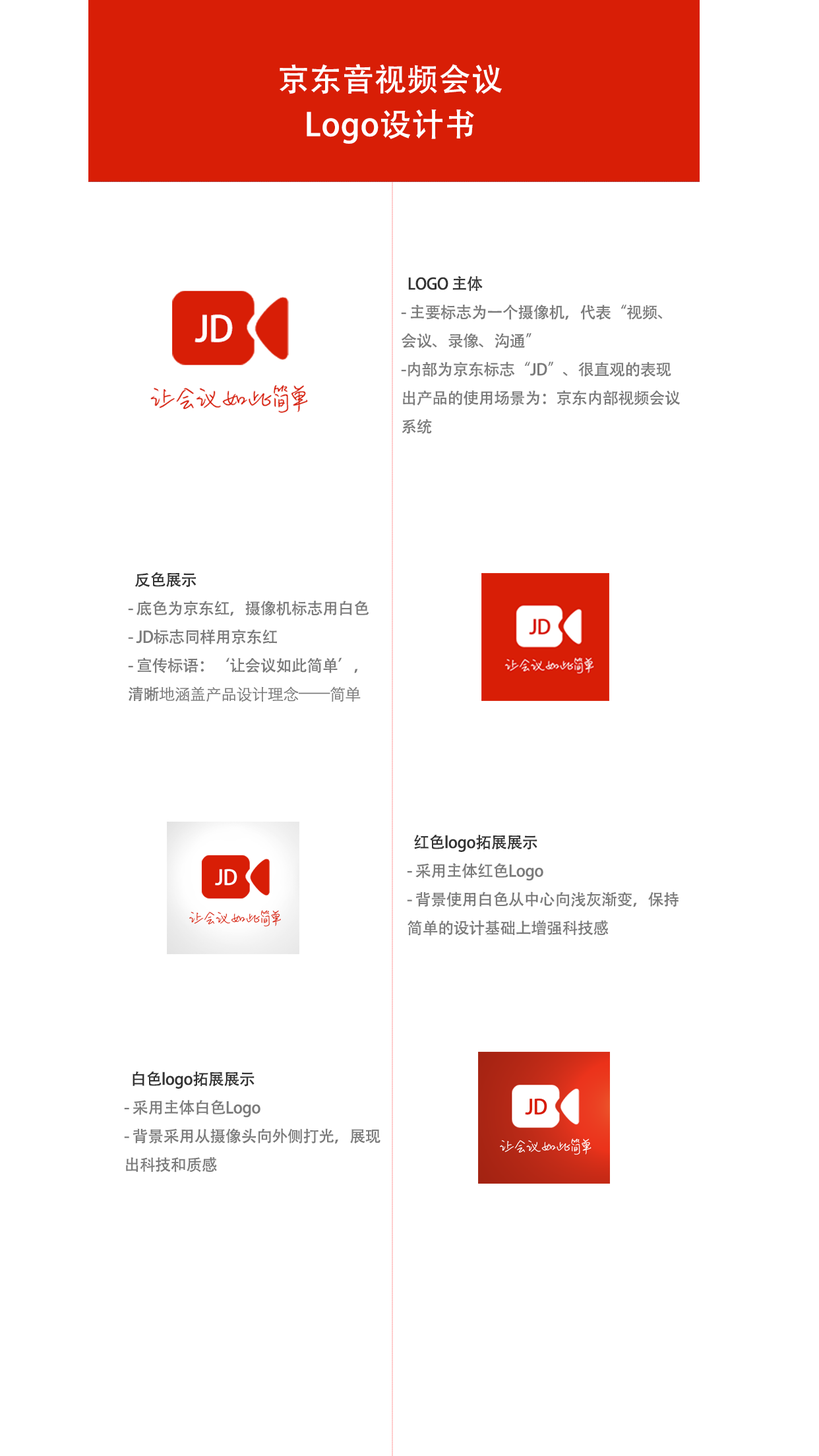
<style>
.page{position:relative;width:819px;height:1456px;background:#ffffff}
.page>*{position:absolute;margin:0}
.t1{font:31.7px/45.1px "AdobeHeitiStd-Regular";letter-spacing:0.02em;color:#ffffff}
.t2{font:15.8px/28.6px "AdobeHeitiStd-Regular";letter-spacing:-0.02em;color:#7a7a7a}
.t3{font:15.8px/28.6px "AdobeHeitiStd-Regular";letter-spacing:-0.02em;color:#333333}
.t4{font:15.8px/28.6px "STHeitiSC-Light";letter-spacing:-0.02em;color:#7a7a7a}
</style>
<div class="page">
<p class="t1" style="left:280px;top:64px;width:222px;height:80px;text-align:center">京东音视频会议<br>Logo设计书</p>
<p class="t2" style="left:401px;top:276px;width:279px;height:158px"><span class="t3">  LOGO 主体<br></span>- 主要标志为一个摄像机，代表“视频、<br>会议、录像、沟通” <br>-内部为京东标志“JD”、很直观的表现<br>出产品的使用场景为：京东内部视频会议<br>系统</p>
<p class="t2" style="left:128px;top:572px;width:241px;height:130px"><span class="t3">  反色展示<br></span>- 底色为京东红，摄像机标志用白色<br>- JD标志同样用京东红<br>- 宣传标语：‘让会议如此简单’，<br>清晰<span class="t4">地涵盖产品设计理念——简单</span></p>
<p class="t2" style="left:407px;top:834px;width:272px;height:102px"><span class="t3">  红色logo拓展展示<br></span>- 采用主体红色Logo<br>- 背景使用白色从中心向浅灰渐变，保持<br>简单的设计基础上增强科技感</p>
<p class="t2" style="left:124px;top:1071px;width:256px;height:101px"><span class="t3">  白色logo拓展展示<br></span>- 采用主体白色Logo<br>- 背景采用从摄像头向外侧打光，展现<br>出科技和质感</p>
</div>
